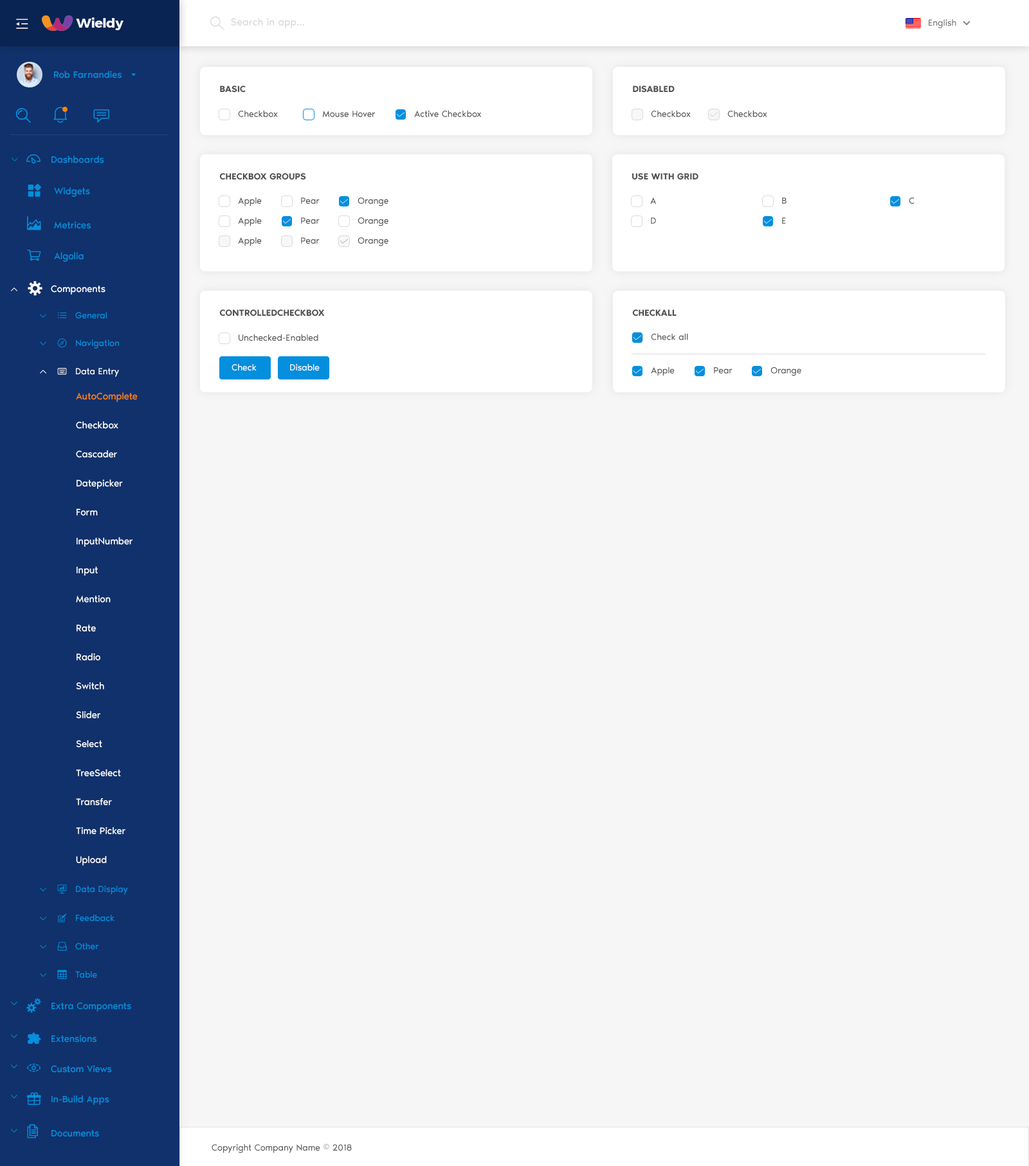
<style>
.page{position:relative;width:1029px;height:1166px;background:#f6f6f6}
.page>*{position:absolute;margin:0}
.t1{font:10.3px "NoirPro-Regular";color:#d9d9d9}
.t2{font:9px "NoirPro-Regular";color:#757575}
.t3{font:9.6px "NoirPro-Regular";color:#038fde}
.t4{font:9px "NoirPro-SemiBold";color:#535353;text-transform:uppercase}
.t5{font:9px "NoirPro-Regular";color:#545454}
.t6{font:9px "gaxondrift"}
.t7{font:9px "gaxondrift";color:#c1c1c1}
.t8{font:7.7px "gaxonant"}
.t9{font:14.1px "gaxonant";color:#038fde}
.t10{font:9px "NoirPro-Regular"}
.t11{font:14.1px "gaxonant";color:#ffffff}
.t12{font:9.6px "NoirPro-Regular";color:#ffffff}
.t13{font:7.7px "gaxonant";color:#038fde}
.t14{font:9px "gaxonant";color:#038fde}
.t15{font:9px "NoirPro-Regular";color:#038fde}
.t16{font:9px "NoirPro-Regular";color:#ffffff}
.t17{font:9px "gaxonant";color:#ffffff}
.t18{font:9.6px/25.7px "NoirPro-Regular";color:#ffffff}
.t19{font:9.6px/25.7px "NoirPro-Regular";color:#ff8400}
.t20{font:7.5px "gaxonant";color:#038fde}
.t21{font:9px "NoirPro-Regular";color:#595959}
</style>
<div class="page">
<p class="t1" style="left:231px;top:18px;width:73px;height:10px">Search in app...</p>
<p class="t2" style="left:928px;top:19px;width:28px;height:9px">English</p>
<p class="t3" style="left:54px;top:71px;width:68px;height:7px">Rob Farnandies</p>
<p class="t4" style="left:220px;top:86px;width:26px;height:7px">Basic</p>
<p class="t4" style="left:633px;top:86px;width:41px;height:7px">Disabled</p>
<p class="t5" style="left:238px;top:110px;width:40px;height:7px">Checkbox</p>
<p class="t5" style="left:322px;top:111px;width:53px;height:6px">Mouse Hover</p>
<p class="t6" style="left:396px;top:112px;width:8px;height:5px">Z</p>
<p class="t5" style="left:414px;top:110px;width:68px;height:7px">Active Checkbox</p>
<p class="t5" style="left:651px;top:110px;width:39px;height:7px">Checkbox</p>
<p class="t7" style="left:709px;top:112px;width:8px;height:5px">Z</p>
<p class="t5" style="left:727px;top:110px;width:40px;height:7px">Checkbox</p>
<p class="t8" style="left:12px;top:158px;width:6px;height:3px">2</p>
<p class="t9" style="left:26px;top:154px;width:14px;height:10px">-</p>
<p class="t3" style="left:51px;top:156px;width:53px;height:7px">Dashboards</p>
<p class="t4" style="left:219px;top:173px;width:87px;height:7px">Checkbox Groups</p>
<p class="t4" style="left:632px;top:173px;width:66px;height:7px">Use with grid</p>
<p class="t3" style="left:54px;top:187px;width:36px;height:10px">Widgets</p>
<p class="t5" style="left:238px;top:197px;width:24px;height:9px">Apple</p>
<p class="t5" style="left:301px;top:197px;width:19px;height:7px">Pear</p>
<p class="t5" style="left:357px;top:197px;width:31px;height:9px">Orange</p>
<p class="t5" style="left:650px;top:197px;width:6px;height:7px">A</p>
<p class="t5" style="left:782px;top:197px;width:4px;height:7px">B</p>
<p class="t5" style="left:908px;top:197px;width:6px;height:7px">C</p>
<p class="t6" style="left:339px;top:199px;width:9px;height:5px">Z</p>
<p class="t6" style="left:890px;top:199px;width:9px;height:5px">Z</p>
<p class="t9" style="left:27px;top:216px;width:14px;height:14px">m</p>
<p class="t3" style="left:54px;top:221px;width:37px;height:8px">Metrices</p>
<p class="t5" style="left:238px;top:217px;width:24px;height:9px">Apple</p>
<p class="t6" style="left:282px;top:219px;width:9px;height:5px">Z</p>
<p class="t5" style="left:301px;top:217px;width:19px;height:7px">Pear</p>
<p class="t5" style="left:357px;top:217px;width:31px;height:9px">Orange</p>
<p class="t5" style="left:651px;top:217px;width:5px;height:7px">D</p>
<p class="t6" style="left:763px;top:219px;width:8px;height:5px">Z</p>
<p class="t10" style="left:782px;top:217px;width:4px;height:7px">E</p>
<p class="t5" style="left:238px;top:237px;width:24px;height:9px">Apple</p>
<p class="t5" style="left:301px;top:237px;width:19px;height:7px">Pear</p>
<p class="t6" style="left:339px;top:239px;width:9px;height:5px">Z</p>
<p class="t5" style="left:357px;top:237px;width:31px;height:9px">Orange</p>
<p class="t3" style="left:54px;top:252px;width:30px;height:10px">Algolia</p>
<p class="t11" style="left:28px;top:281px;width:14px;height:15px">%</p>
<p class="t8" style="left:11px;top:287px;width:6px;height:4px">5</p>
<p class="t12" style="left:51px;top:285px;width:54px;height:9px">Components</p>
<p class="t13" style="left:40px;top:314px;width:6px;height:4px">2</p>
<p class="t14" style="left:58px;top:312px;width:9px;height:6px">h</p>
<p class="t15" style="left:75px;top:312px;width:32px;height:7px">General</p>
<p class="t4" style="left:219px;top:309px;width:106px;height:7px">ControlledCheckbox</p>
<p class="t4" style="left:632px;top:309px;width:44px;height:7px">CheckAll</p>
<p class="t13" style="left:40px;top:341px;width:6px;height:4px">2</p>
<p class="t15" style="left:76px;top:339px;width:43px;height:9px">Navigation</p>
<p class="t5" style="left:239px;top:334px;width:79px;height:7px">Unchecked-Enabled</p>
<p class="t6" style="left:633px;top:335px;width:8px;height:5px">Z</p>
<p class="t5" style="left:651px;top:333px;width:37px;height:7px">Check all</p>
<p class="t16" style="left:231px;top:364px;width:25px;height:7px">Check</p>
<p class="t16" style="left:290px;top:364px;width:30px;height:7px">Disable</p>
<p class="t8" style="left:40px;top:370px;width:6px;height:4px">5</p>
<p class="t17" style="left:57px;top:368px;width:10px;height:7px">/</p>
<p class="t16" style="left:76px;top:368px;width:43px;height:9px">Data Entry</p>
<p class="t6" style="left:633px;top:368px;width:8px;height:6px">Z</p>
<p class="t5" style="left:651px;top:366px;width:23px;height:9px">Apple</p>
<p class="t6" style="left:695px;top:368px;width:8px;height:6px">Z</p>
<p class="t5" style="left:714px;top:367px;width:18px;height:7px">Pear</p>
<p class="t6" style="left:752px;top:368px;width:8px;height:6px">Z</p>
<p class="t5" style="left:770px;top:366px;width:31px;height:10px">Orange</p>
<p class="t18" style="left:76px;top:392px;width:62px;height:473px"><span class="t19">AutoComplete<br></span>Checkbox<br>Cascader<br>Datepicker<br>Form<br>InputNumber<br>Input<br>Mention<br>Rate<br>Radio<br>Switch<br>Slider<br>Select<br>TreeSelect<br>Transfer<br>Time Picker<br>Upload</p>
<p class="t13" style="left:40px;top:887px;width:6px;height:4px">2</p>
<p class="t14" style="left:57px;top:884px;width:10px;height:10px">.</p>
<p class="t15" style="left:76px;top:885px;width:52px;height:9px">Data Display</p>
<p class="t13" style="left:40px;top:916px;width:6px;height:4px">2</p>
<p class="t15" style="left:76px;top:914px;width:38px;height:7px">Feedback</p>
<p class="t13" style="left:40px;top:944px;width:6px;height:4px">2</p>
<p class="t15" style="left:75px;top:942px;width:23px;height:8px">Other</p>
<p class="t13" style="left:40px;top:973px;width:6px;height:4px">2</p>
<p class="t15" style="left:75px;top:971px;width:22px;height:7px">Table</p>
<p class="t20" style="left:11px;top:1001px;width:6px;height:4px">2</p>
<p class="t3" style="left:51px;top:1002px;width:80px;height:9px">Extra Components</p>
<p class="t20" style="left:11px;top:1034px;width:6px;height:4px">2</p>
<p class="t3" style="left:51px;top:1034px;width:45px;height:8px">Extensions</p>
<p class="t20" style="left:11px;top:1064px;width:6px;height:4px">2</p>
<p class="t9" style="left:27px;top:1063px;width:13px;height:9px">,</p>
<p class="t3" style="left:51px;top:1065px;width:61px;height:7px">Custom Views</p>
<p class="t20" style="left:11px;top:1094px;width:6px;height:4px">2</p>
<p class="t3" style="left:51px;top:1095px;width:58px;height:9px">In-Build Apps</p>
<p class="t20" style="left:11px;top:1128px;width:6px;height:4px">2</p>
<p class="t9" style="left:27px;top:1124px;width:11px;height:14px">)</p>
<p class="t3" style="left:51px;top:1130px;width:48px;height:7px">Documents</p>
<p class="t21" style="left:212px;top:1143px;width:140px;height:10px">Copyright Company Name © 2018</p>
</div>
